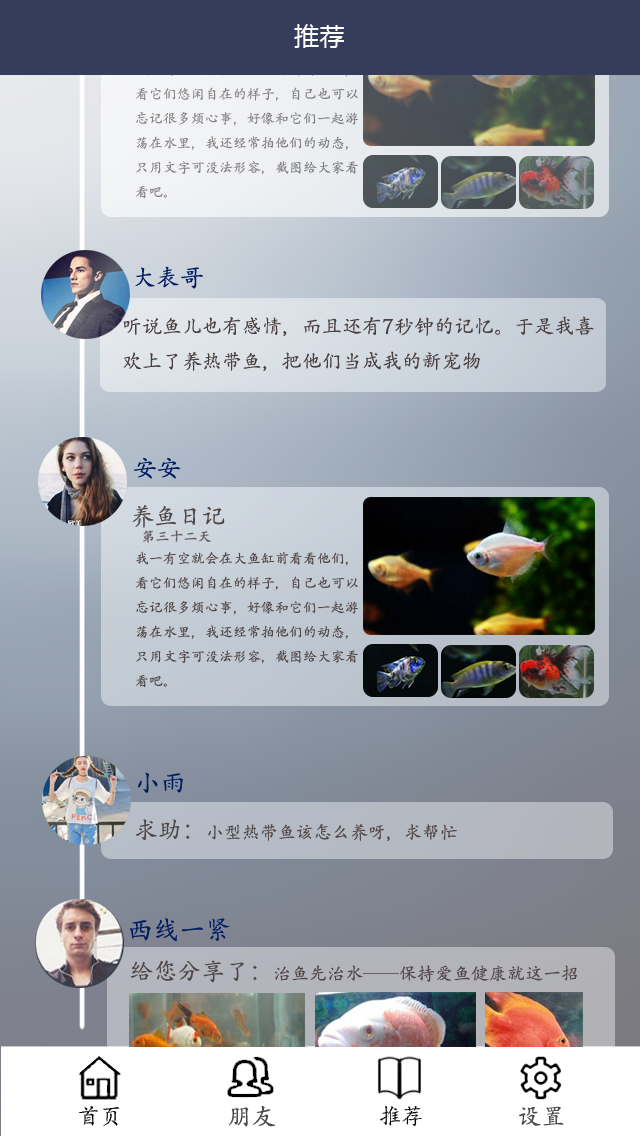
<style>
.page{position:relative;width:640px;height:1136px}
.page>*{position:absolute;margin:0}
.t1{font:25.5px "MicrosoftYaHeiUI";color:#ffffff}
.t2{font:24px "AdobeKaitiStd-Regular";color:#001c62}
.t3{font:20px "AdobeKaitiStd-Regular";color:#4a3e3e}
.t4{font:14px "AdobeKaitiStd-Regular";color:#504646}
.t5{font:26px "AdobeKaitiStd-Regular";color:#001c62}
.t6{font:18px "AdobeKaitiStd-Regular";color:#504646}
.t7{font:24px "AdobeKaitiStd-Regular";color:#504646}
</style>
<div class="page">
<p class="t1" style="left:294px;top:24px;width:50px;height:24px">推荐</p>
<p class="t2" style="left:135px;top:266px;width:68px;height:23px">大表哥</p>
<p class="t3" style="left:123px;top:316px;width:471px;height:56px">听说鱼儿也有感情，而且还有7秒钟的记忆。于是我喜<br>欢上了养热带鱼，把他们当成我的新宠物</p>
<p class="t4" style="left:136px;top:551px;width:222px;height:137px">我一有空就会在大鱼缸前看看他们，<br>看它们悠闲自在的样子，自己也可以<br>忘记很多烦心事，好像和它们一起游<br>荡在水里，我还经常拍他们的动态，<br>只用文字可没法形容，截图给大家看<br>看吧。</p>
<p class="t5" style="left:138px;top:772px;width:45px;height:21px">小雨</p>
<p class="t6" style="left:136px;top:819px;width:321px;height:22px"><span class="t7">求助：</span>小型热带鱼该怎么养呀，求帮忙</p>
<p class="t5" style="left:129px;top:918px;width:101px;height:24px">西线一紧</p>
<p class="t6" style="left:131px;top:960px;width:446px;height:23px"><span class="t7">给您分享了：</span>治鱼先治水——保持爱鱼健康就这一招</p>
</div>
